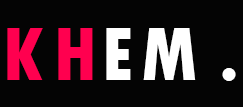
<style>
.page{position:relative;width:243px;height:107px;background:#040404}
.page>*{position:absolute;margin:0}
.t1{font:79px "TwCenMT-CondensedExtraBold";color:#ff004f;text-transform:uppercase}
.t2{font:79px "TwCenMT-CondensedExtraBold";color:#ffffff;text-transform:uppercase}
</style>
<div class="page">
<p class="t1" style="left:7px;top:28px;width:36px;height:52px">K</p>
<p class="t1" style="left:58px;top:28px;width:35px;height:52px">H</p>
<p class="t2" style="left:106px;top:28px;width:25px;height:52px">e</p>
<p class="t2" style="left:143px;top:28px;width:93px;height:53px">m .</p>
</div>
